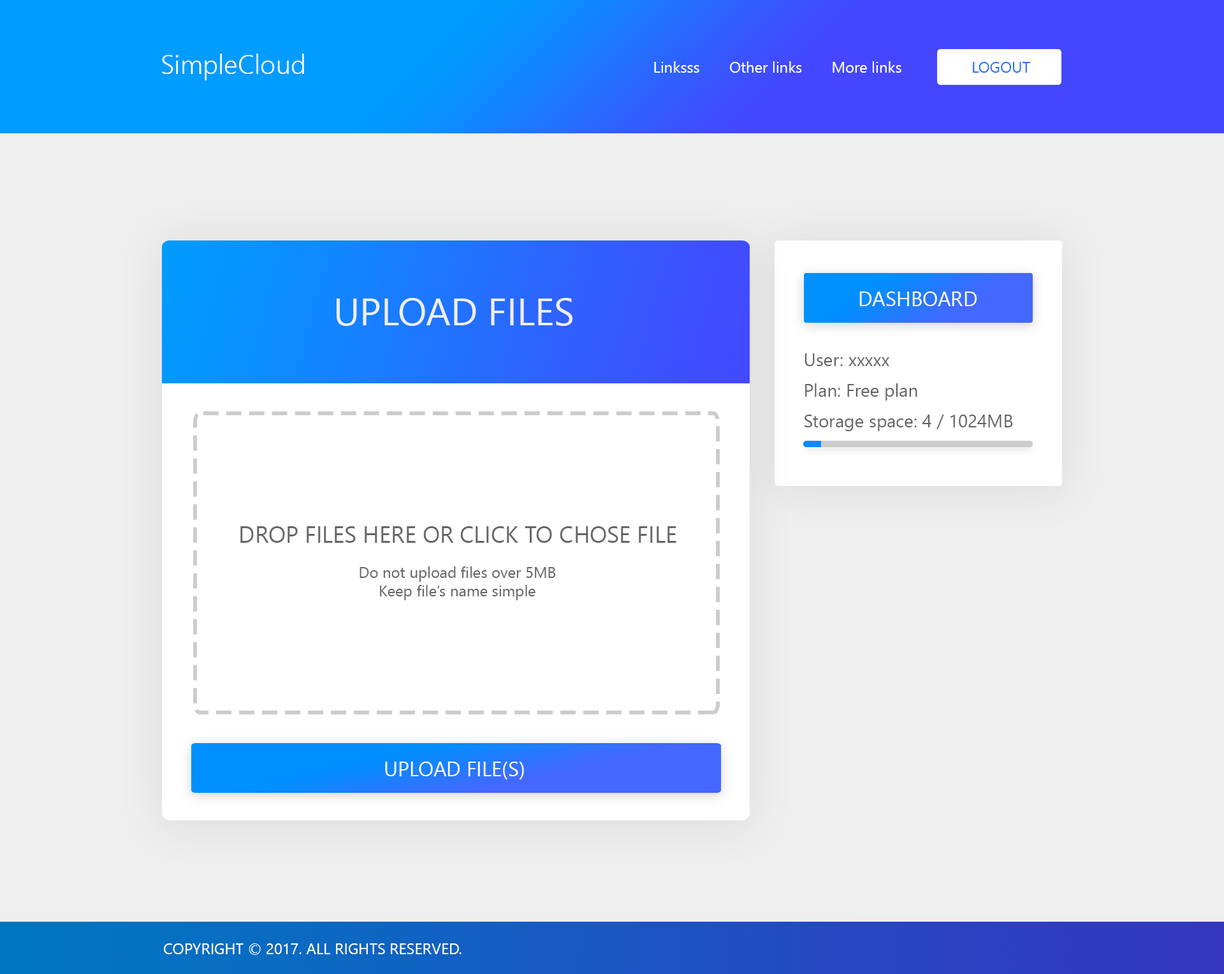
<style>
.page{position:relative;width:1224px;height:974px;background:#efefef}
.page>*{position:absolute;margin:0}
.t1{font:26.8px "NirmalaUI-Semilight";color:#ffffff}
.t2{font:15.3px "NirmalaUI";color:#ffffff}
.t3{font:15.3px "NirmalaUI";color:#276cff}
.t4{font:20.4px "NirmalaUI";color:#ffffff}
.t5{font:38.3px "NirmalaUI";color:#efefef}
.t6{font:17.9px/30.6px "NirmalaUI";color:#626262}
.t7{font:23px "NirmalaUI";color:#666666}
.t8{font:15.3px "NirmalaUI";color:#666666}
</style>
<div class="page">
<p class="t1" style="left:162px;top:54px;width:142px;height:26px">SimpleCloud</p>
<p class="t2" style="left:654px;top:61px;width:248px;height:12px">Linksss       Other links       More links</p>
<p class="t3" style="left:973px;top:62px;width:58px;height:11px">LOGOUT</p>
<p class="t4" style="left:860px;top:291px;width:117px;height:15px">DASHBOARD</p>
<p class="t5" style="left:337px;top:298px;width:236px;height:28px">UPLOAD FILES</p>
<p class="t6" style="left:805px;top:353px;width:208px;height:78px">User: xxxxx<br>Plan: Free plan<br>Storage space: 4 / 1024MB</p>
<p class="t7" style="left:240px;top:526px;width:437px;height:17px">DROP FILES HERE OR CLICK TO CHOSE FILE</p>
<p class="t8" style="left:360px;top:566px;width:196px;height:34px;text-align:center">Do not upload files over 5MB<br>Keep file’s name simple</p>
<p class="t4" style="left:385px;top:761px;width:139px;height:18px">UPLOAD FILE(S)</p>
<p class="t2" style="left:164px;top:943px;width:298px;height:12px">COPYRIGHT © 2017. ALL RIGHTS RESERVED.</p>
</div>
